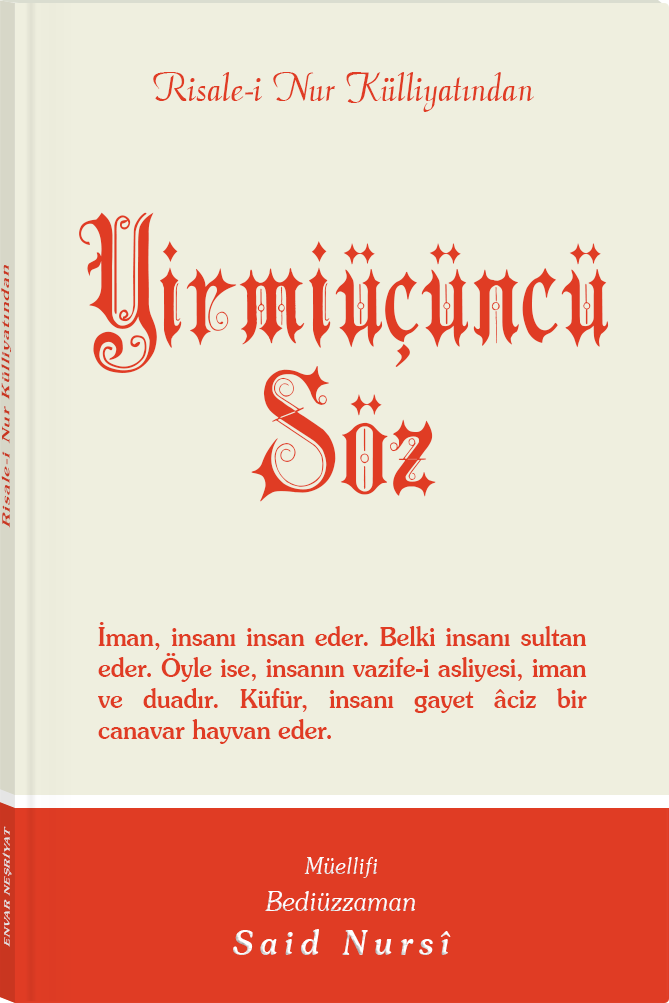
<style>
.page{position:relative;width:669px;height:1003px;background:#efefdf}
.page>*{position:absolute;margin:0}
.t1{font:45.3px "Barla © 072 Aria ScriptScriptSSi";color:#e03c24;scale:0.94 1}
.t2{font:170.1px/151.7px "Barla © 001 Liva Nur";letter-spacing:-0.001em;color:#e03c24;scale:0.92 1}
.t3{font:11.4px "Souvenir-Medium";letter-spacing:0.08em;color:#e03c24;scale:1.65 1}
.t4{font:25.7px/31.1px "Souvenir-Medium";color:#e03c24;scale:0.93 1}
.t5{font:8.3px "Souvenir-Medium";letter-spacing:0.08em;color:#e5e5e5;scale:1.43 1}
.t6{font:27.1px/37.8px "Souvenir-LightItalic";color:#ffffff;scale:0.92 1}
.t7{font:22.8px/39.8px "Souvenir-LightItalic";color:#ffffff;scale:0.92 1}
.t8{font:33.9px/43.8px "Souvenir-MediumItalic";letter-spacing:0.2em;color:#ffffff;scale:0.92 1}
</style>
<div class="page">
<p class="t1" style="left:153px;top:72px;width:381px;height:40px">Risale-i Nur Külliyatından</p>
<p class="t2" style="left:79px;top:212px;width:530px;height:290px;text-align:center">Yirmiüçüncü<br>Söz</p>
<p class="t3" style="left:1px;top:265px;width:10px;height:263px;rotate:-90deg">Risale-i Nur Külliyatından</p>
<p class="t4" style="left:98px;top:622px;width:489px;height:122px;text-align:justify">İman, insanı insan eder. Belki insanı sultan eder. Öyle ise, insanın vazife-i asliyesi, iman ve duadır. Küfür, insanı gayet âciz bir canavar hayvan eder.</p>
<p class="t5" style="left:2px;top:826px;width:10px;height:121px;rotate:-90deg">ENVAR NEŞRİYAT</p>
<p class="t6" style="left:233px;top:857px;width:218px;height:98px;text-align:center"><span class="t7">Müellifi<br></span>Bediüzzaman<br><span class="t8">Said Nursî</span></p>
</div>
